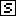
<style>
.page{position:relative;width:16px;height:16px;background:#ffffff}
.page>*{position:absolute;margin:0}
.t1{font:16px "Silkscreen";letter-spacing:-0.05em;color:#000000}
</style>
<div class="page">
<p class="t1" style="left:4px;top:3px;width:8px;height:10px">S</p>
</div>
